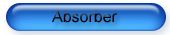
<style>
.page{position:relative;width:170px;height:35px}
.page>*{position:absolute;margin:0}
.t1{font:16px "ArialMT";color:#000000}
</style>
<div class="page">
<p class="t1" style="left:52px;top:10px;width:65px;height:13px">Absorber</p>
</div>
